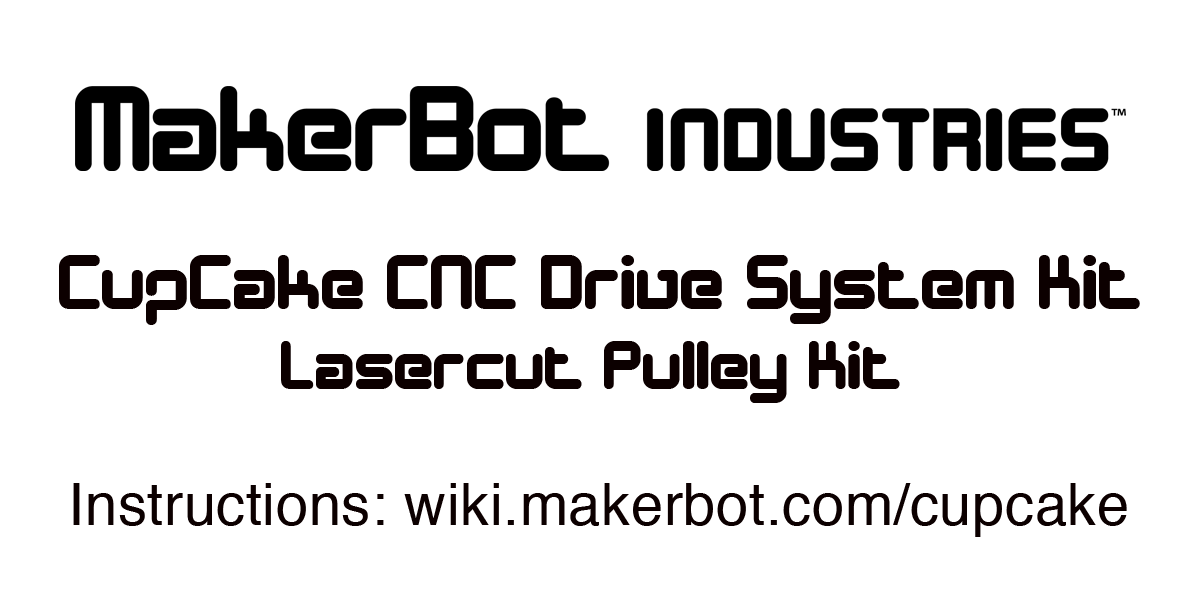
<style>
.page{position:relative;width:1200px;height:600px;background:#ffffff}
.page>*{position:absolute;margin:0}
.t1{font:79.1px "DesignerBlock";letter-spacing:0.01em;color:#0c0000}
.t2{font:70.9px "DesignerBlock";letter-spacing:0.01em;color:#0c0000}
.t3{font:57.9px "Helvetica";letter-spacing:0.01em;color:#0c0000}
</style>
<div class="page">
<p class="t1" style="left:59px;top:255px;width:1081px;height:70px">CupCake CNC Drive System Kit</p>
<p class="t2" style="left:281px;top:341px;width:619px;height:62px">Lasercut Pulley Kit</p>
<p class="t3" style="left:73px;top:483px;width:1054px;height:54px">Instructions: wiki.makerbot.com/cupcake</p>
</div>
